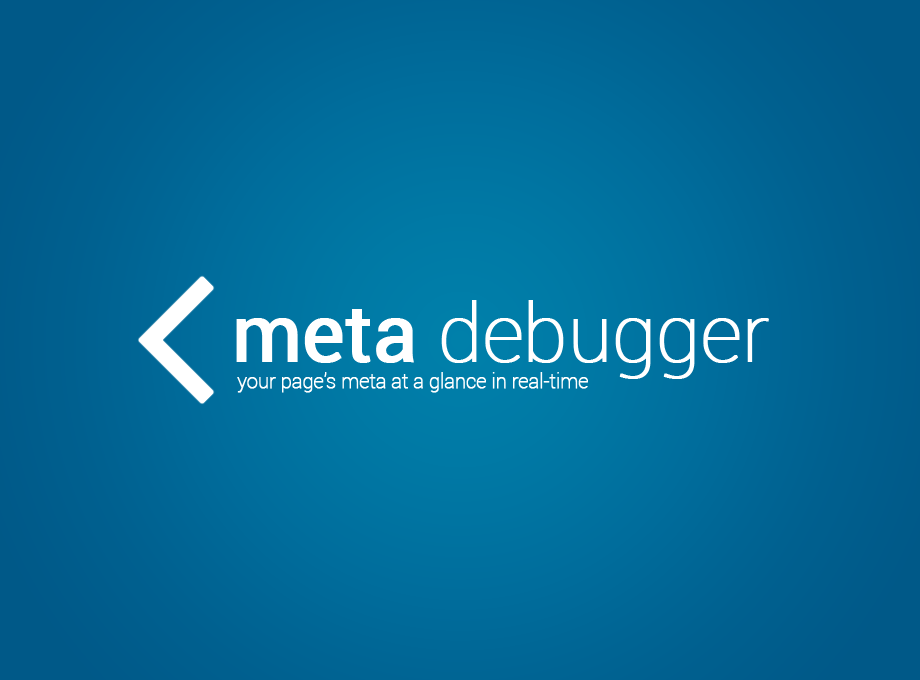
<style>
.page{position:relative;width:920px;height:680px}
.page>*{position:absolute;margin:0}
.t1{font:80px "Roboto-Thin";letter-spacing:-0.02em;color:#ffffff;font-weight:bold}
.t2{font:80px "Roboto-Regular";letter-spacing:-0.02em;color:#ffffff;font-weight:bold}
.t3{font:20px "Roboto-Thin";letter-spacing:-0.02em;color:#ffffff;font-weight:bold}
</style>
<div class="page">
<p class="t1" style="left:236px;top:300px;width:533px;height:79px"><span class="t2">meta </span>debugger</p>
<p class="t3" style="left:237px;top:372px;width:351px;height:21px">your page’s meta at a glance in real-time</p>
</div>
